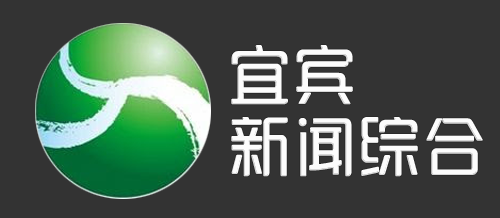
<style>
.page{position:relative;width:500px;height:218px;background:#333333}
.page>*{position:absolute;margin:0}
.t1{font:65px/72px "SJyunlvyuan";color:#fdfdfd}
</style>
<div class="page">
<p class="t1" style="left:231px;top:45px;width:252px;height:132px">宜宾<br>新闻综合</p>
</div>
